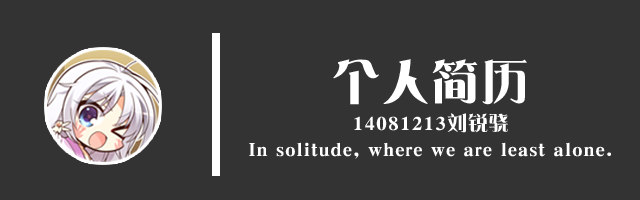
<style>
.page{position:relative;width:640px;height:200px;background:#333333}
.page>*{position:absolute;margin:0}
.t1{font:20px/26px "DFPYaSongW9";letter-spacing:0.04em;color:#ffffff}
.t2{font:48px/55px "DFPYaSongW9";letter-spacing:0.04em;color:#ffffff}
</style>
<div class="page">
<p class="t1" style="left:249px;top:59px;width:362px;height:100px;text-align:center"><span class="t2">个人简历<br></span>14081213刘锐骁<br>In solitude, where we are least alone.</p>
</div>
